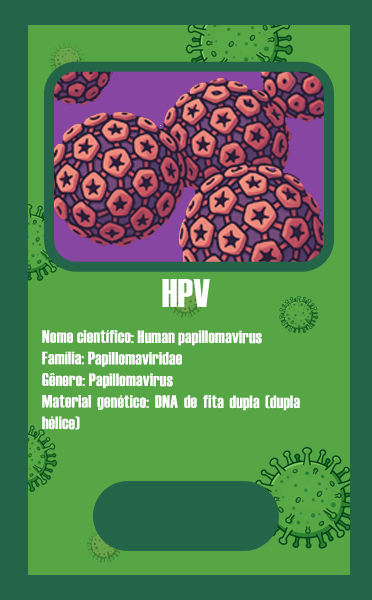
<style>
.page{position:relative;width:372px;height:600px;background:#56a645}
.page>*{position:absolute;margin:0}
.t1{font:40px "Haettenschweiler";letter-spacing:0.015em;color:#ffffff}
.t2{font:18px "Haettenschweiler";letter-spacing:0.015em;color:#ffffff}
</style>
<div class="page">
<p class="t1" style="left:162px;top:279px;width:48px;height:28px">HPV</p>
<p class="t2" style="left:42px;top:330px;width:258px;height:100px;text-align:justify">Nome científico: Human papillomavirus<br>Família: Papillomaviridae<br>Gênero: Papillomavirus<br>Material genético: DNA de fita dupla (dupla hélice)</p>
</div>
